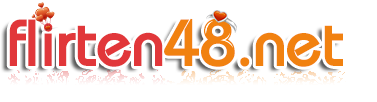
<style>
.page{position:relative;width:377px;height:102px;background:#ffffff}
.page>*{position:absolute;margin:0}
.t1{font:64.3px "BiminiBold";color:#e1373a}
.t2{font:64.3px "BiminiBold";color:#f18110}
</style>
<div class="page">
<p class="t1" style="left:9px;top:18px;width:334px;height:49px">flirten<span class="t2">48.net</span></p>
</div>
